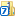
<style>
.page{position:relative;width:16px;height:16px;background:#ffffff}
.page>*{position:absolute;margin:0}
.t1{font:8px "Tahoma-Bold";color:#0064c8}
</style>
<div class="page">
<p class="t1" style="left:2px;top:8px;width:5px;height:6px">7</p>
</div>
